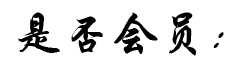
<style>
.page{position:relative;width:240px;height:70px;background:#ffffff}
.page>*{position:absolute;margin:0}
.t1{font:48px "STXingkai";color:#000000}
</style>
<div class="page">
<p class="t1" style="left:18px;top:12px;width:206px;height:44px">是否会员：</p>
</div>
